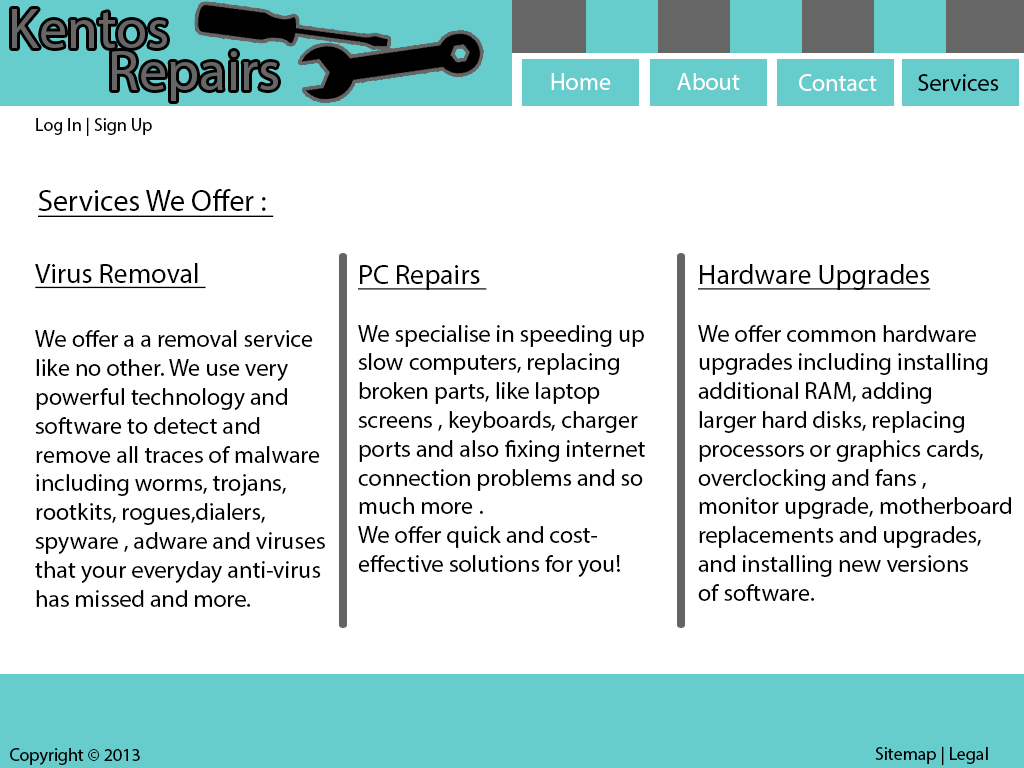
<style>
.page{position:relative;width:1024px;height:768px;background:#ffffff}
.page>*{position:absolute;margin:0}
.t1{font:24px "MyriadPro-Regular";color:#ffffff}
.t2{font:24px "MyriadPro-Regular";color:#fffdfd}
.t3{font:24px "MyriadPro-Regular";color:#fffefe}
.t4{font:24px "MyriadPro-Regular";color:#000000}
.t5{font:18px "MyriadPro-Regular";color:#000000}
.t6{font:30px "MyriadPro-Regular";color:#000000;text-decoration:underline}
.t7{font:28px "MyriadPro-Regular";color:#000000;text-decoration:underline}
</style>
<div class="page">
<p class="t1" style="left:551px;top:73px;width:60px;height:17px">Home</p>
<p class="t2" style="left:677px;top:73px;width:63px;height:17px">About</p>
<p class="t3" style="left:799px;top:74px;width:78px;height:17px">Contact</p>
<p class="t4" style="left:918px;top:74px;width:81px;height:17px">Services</p>
<p class="t5" style="left:36px;top:117px;width:116px;height:19px">Log In | Sign Up</p>
<p class="t6" style="left:38px;top:189px;width:236px;height:28px">Services We Offer :</p>
<p class="t4" style="left:35px;top:263px;width:290px;height:344px"><span class="t7">Virus Removal <br><br></span>We offer a a removal service<br>like no other. We use very<br>powerful technology and <br>software to detect and <br>remove all traces of malware <br>including worms, trojans, <br>rootkits, rogues,dialers, <br>spyware , adware and viruses <br>that your everyday anti-virus <br>has missed and more.</p>
<p class="t4" style="left:358px;top:265px;width:287px;height:312px"><span class="t7">PC Repairs <br></span><br>We specialise in speeding up<br>slow computers, replacing <br>broken parts, like laptop <br>screens , keyboards, charger <br>ports and also fixing internet <br>connection problems and so <br>much more . <br>We offer quick and cost-<br>effective solutions for you!</p>
<p class="t4" style="left:698px;top:264px;width:313px;height:337px"><span class="t7">Hardware Upgrades <br></span><br>We offer common hardware <br>upgrades including installing<br>additional RAM, adding <br>larger hard disks, replacing <br>processors or graphics cards, <br>overclocking and fans ,<br>monitor upgrade, motherboard<br>replacements and upgrades,<br>and installing new versions <br>of software.</p>
<p class="t5" style="left:10px;top:748px;width:130px;height:17px">Copyright © 2013</p>
<p class="t5" style="left:875px;top:746px;width:113px;height:19px">Sitemap | Legal</p>
</div>
